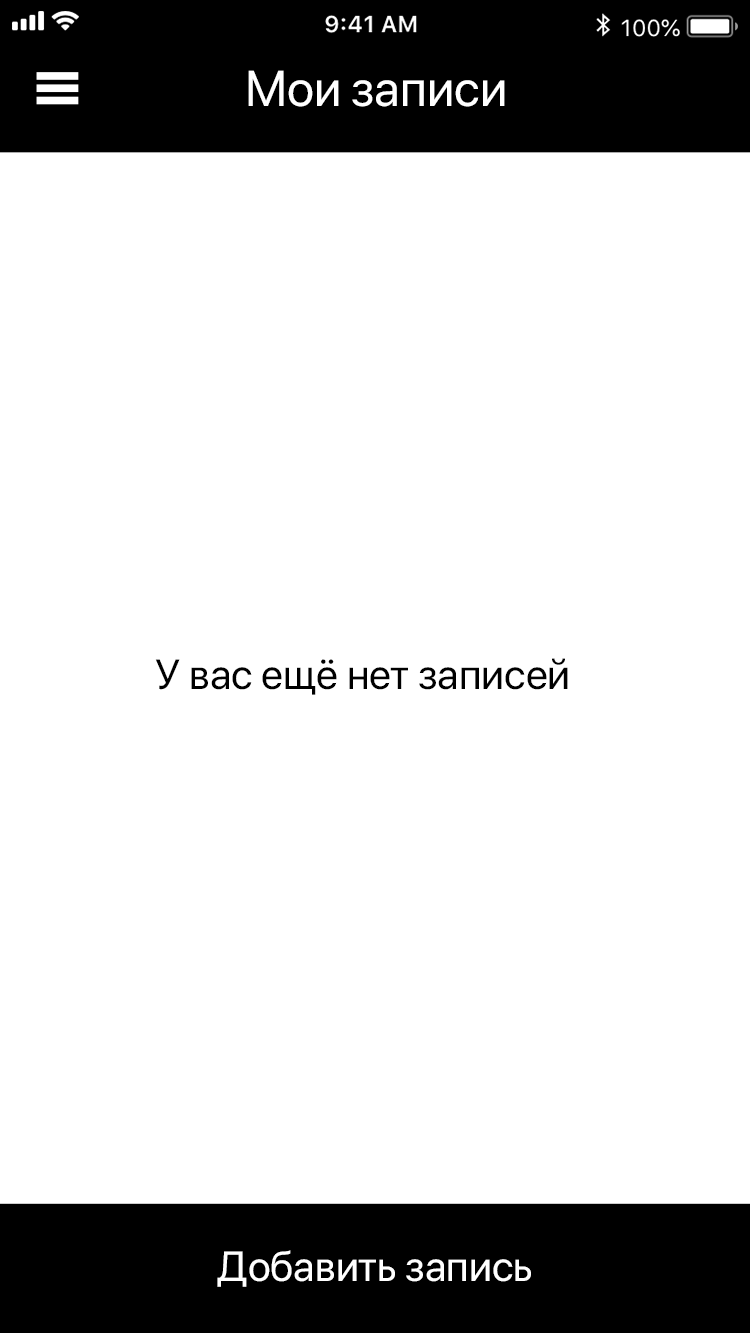
<style>
.page{position:relative;width:750px;height:1333px;background:#ffffff}
.page>*{position:absolute;margin:0}
.t1{font:50px "SFProDisplay-Regular";color:#ffffff}
.t2{font:42px "SFProDisplay-Regular";color:#000000}
.t3{font:42px "SFProDisplay-Regular";color:#ffffff}
</style>
<div class="page">
<p class="t1" style="left:248px;top:70px;width:257px;height:37px">Мои записи</p>
<p class="t2" style="left:155px;top:658px;width:413px;height:37px">У вас ещё нет записей</p>
<p class="t3" style="left:217px;top:1250px;width:314px;height:37px">Добавить запись</p>
</div>
